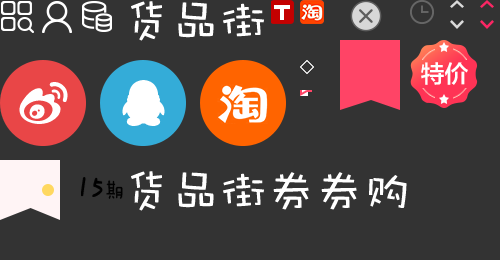
<style>
.page{position:relative;width:500px;height:260px;background:#333333}
.page>*{position:absolute;margin:0}
.t1{font:48px "DFWaWaSC-W5";color:#ffffff}
</style>
<div class="page">
<p class="t1" style="left:131px;top:1px;width:133px;height:40px">货品街</p>
<p class="t1" style="left:131px;top:171px;width:276px;height:40px">货品街券券购</p>
</div>
